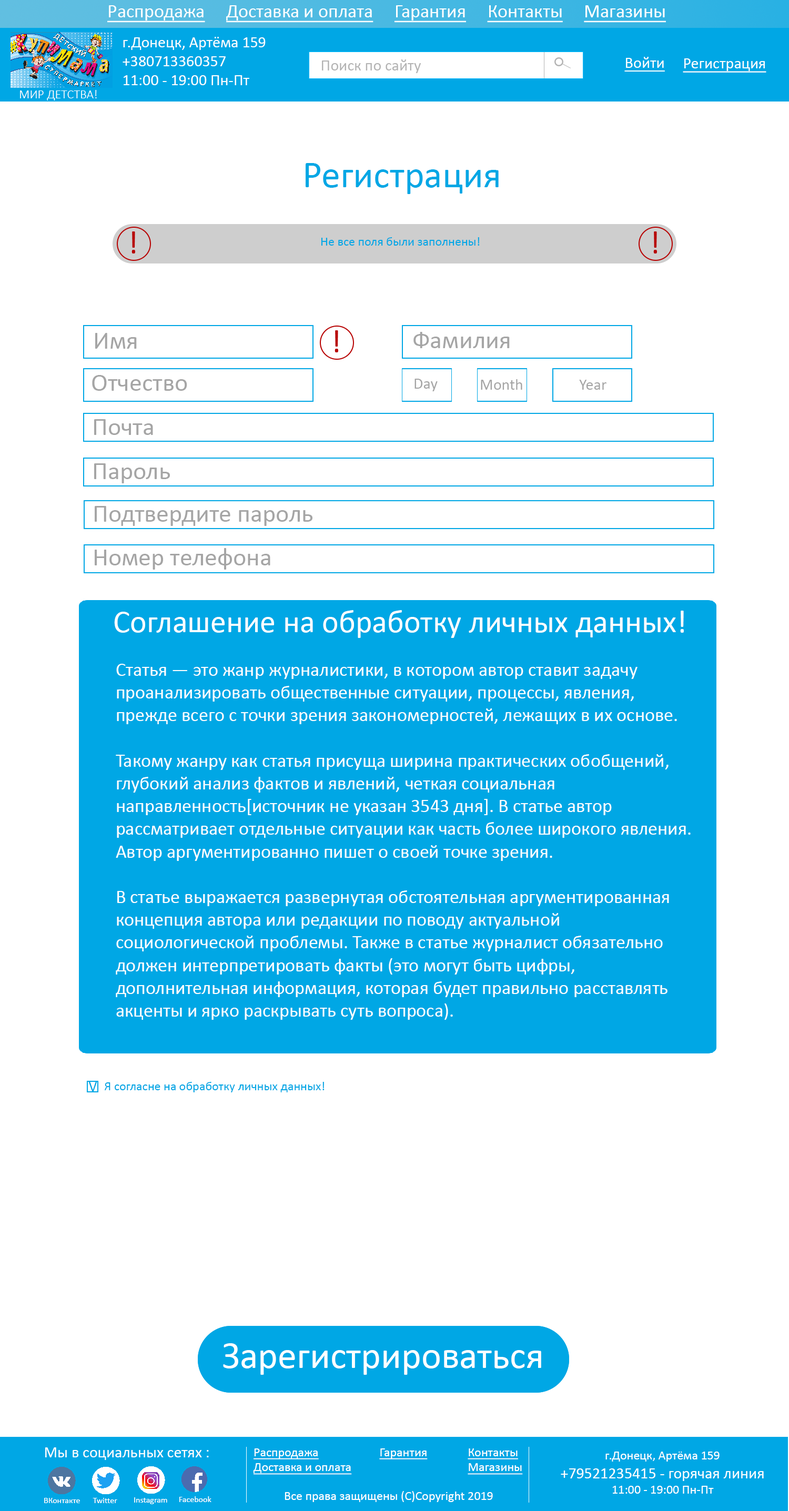
<style>
.page{position:relative;width:789px;height:1511px;background:#ffffff}
.page>*{position:absolute;margin:0}
.t1{font:18.9px "Calibri";color:#ffffff;text-decoration:underline}
.t2{font:15.8px "Calibri";color:#ffffff}
.t3{font:15.8px "Calibri";color:#b3b3b3}
.t4{font:15.8px "Calibri";color:#ffffff;text-decoration:underline}
.t5{font:12.6px "Calibri-Light";color:#ffffff}
.t6{font:37.9px "Calibri";color:#00a7e5}
.t7{font:12.6px "Calibri";color:#00a7e5}
.t8{font:25.2px "Calibri";color:#a5a5a5}
.t9{font:15.8px "Calibri";color:#a5a5a5}
.t10{font:31.6px "Calibri";color:#ffffff}
.t11{font:18.9px "Calibri";color:#ffffff}
.t12{font:15.8px "Calibri";color:#00a7e5}
.t13{font:37.9px "Calibri";color:#ffffff}
.t14{font:12.6px "Calibri";color:#ffffff;text-decoration:underline}
.t15{font:12.6px "Calibri";color:#ffffff}
.t16{font:8.4px "Calibri";color:#ffffff}
</style>
<div class="page">
<p class="t1" style="left:107px;top:5px;width:559px;height:18px">Распродажа     Доставка и оплата     Гарантия     Контакты     Магазины</p>
<p class="t2" style="left:123px;top:37px;width:143px;height:48px">г.Донецк, Артёма 159<br>+380713360357<br>11:00 - 19:00 Пн-Пт</p>
<p class="t3" style="left:322px;top:59px;width:99px;height:14px">Поиск по сайту</p>
<p class="t4" style="left:624px;top:57px;width:41px;height:15px">Войти</p>
<p class="t4" style="left:683px;top:58px;width:83px;height:15px">Регистрация</p>
<p class="t5" style="left:20px;top:90px;width:77px;height:10px">МИР ДЕТСТВА!</p>
<p class="t6" style="left:306px;top:163px;width:193px;height:31px">Регистрация</p>
<p class="t7" style="left:321px;top:237px;width:159px;height:9px">Не все поля были заполнены!</p>
<p class="t8" style="left:95px;top:333px;width:42px;height:16px">Имя</p>
<p class="t8" style="left:413px;top:332px;width:97px;height:16px">Фамилия</p>
<p class="t8" style="left:92px;top:375px;width:95px;height:16px">Отчество</p>
<p class="t9" style="left:415px;top:379px;width:23px;height:12px">Day</p>
<p class="t9" style="left:481px;top:379px;width:41px;height:11px">Month</p>
<p class="t9" style="left:579px;top:380px;width:28px;height:10px">Year</p>
<p class="t8" style="left:94px;top:419px;width:59px;height:16px">Почта</p>
<p class="t8" style="left:94px;top:463px;width:76px;height:20px">Пароль</p>
<p class="t8" style="left:95px;top:506px;width:217px;height:20px">Подтвердите пароль</p>
<p class="t8" style="left:95px;top:548px;width:175px;height:22px">Номер телефона</p>
<p class="t10" style="left:114px;top:610px;width:570px;height:28px">Соглашение на обработку личных данных!</p>
<p class="t11" style="left:116px;top:664px;width:575px;height:356px">Статья́ — это жанр журналистики, в котором автор ставит задачу проанализировать общественные ситуации, процессы, явления, прежде всего с точки зрения закономерностей, лежащих в их основе.<br><br>Такому жанру как статья присуща ширина практических обобщений, глубокий анализ фактов и явлений, четкая социальная направленность[источник не указан 3543 дня]. В статье автор рассматривает отдельные ситуации как часть более широкого явления. Автор аргументированно пишет о своей точке зрения.<br><br>В статье выражается развернутая обстоятельная аргументированная концепция автора или редакции по поводу актуальной социологической проблемы. Также в статье журналист обязательно должен интерпретировать факты (это могут быть цифры, дополнительная информация, которая будет правильно расставлять акценты и ярко раскрывать суть вопроса).</p>
<p class="t12" style="left:88px;top:1082px;width:9px;height:9px">V</p>
<p class="t7" style="left:105px;top:1082px;width:220px;height:11px">Я согласне на обработку личных данных!</p>
<p class="t13" style="left:223px;top:1343px;width:318px;height:32px">Зарегистрироваться</p>
<p class="t13" style="left:223px;top:1343px;width:318px;height:32px">Зарегистрироваться</p>
<p class="t2" style="left:45px;top:1448px;width:164px;height:12px">Мы в социальных сетях :</p>
<p class="t14" style="left:253px;top:1449px;width:99px;height:26px">Распродажа<br>Доставка и оплата</p>
<p class="t14" style="left:379px;top:1449px;width:49px;height:11px">Гарантия</p>
<p class="t14" style="left:468px;top:1449px;width:55px;height:26px">Контакты<br>Магазины</p>
<p class="t2" style="left:561px;top:1452px;width:203px;height:42px;text-align:center"><span class="t15">г.Донецк, Артёма 159<br></span>+79521235415 - горячая линия<br><span class="t15">11:00 - 19:00 Пн-Пт</span></p>
<p class="t15" style="left:285px;top:1491px;width:208px;height:11px">Все права защищены (С)Copyright 2019</p>
<p class="t16" style="left:44px;top:1498px;width:36px;height:5px">ВКонтакте</p>
<p class="t16" style="left:93px;top:1498px;width:24px;height:5px">Twitter</p>
<p class="t16" style="left:134px;top:1498px;width:33px;height:6px">Instagram</p>
<p class="t16" style="left:179px;top:1497px;width:32px;height:5px">Facebook</p>
</div>
